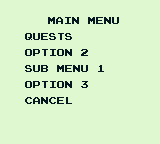
<style>
.page{position:relative;width:160px;height:144px;background:#e0f8d0}
.page>*{position:absolute;margin:0}
.t1{font:8px "PressStart2P";color:#071821}
.t2{font:8px/8px "PressStart2P";color:#071821}
</style>
<div class="page">
<p class="t1" style="left:48px;top:17px;width:71px;height:7px">MAIN MENU</p>
<p class="t2" style="left:25px;top:33px;width:79px;height:71px">QUESTS<br><br>OPTION 2<br><br>SUB MENU 1<br><br>OPTION 3<br><br>CANCEL</p>
</div>
